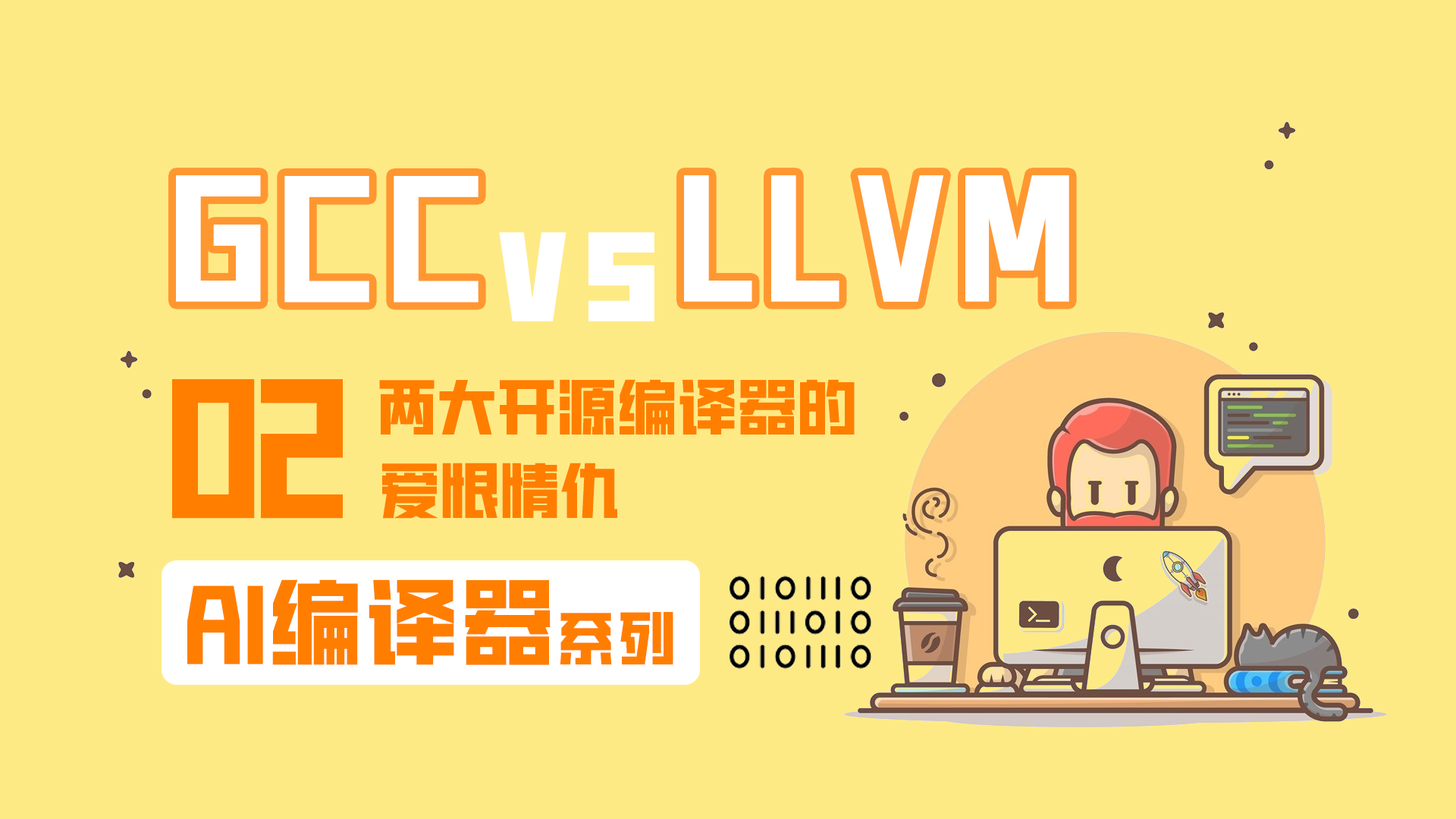
<style>
.page{position:relative;width:1456px;height:819px;background:#feea85}
.page>*{position:absolute;margin:0}
.t1{font:151.7px "HGGTZHVF-Medium";letter-spacing:0.1em;color:#ffffff}
.t2{font:166.8px "HGGTZHVF-Medium";letter-spacing:-0.01em;color:#ff7e00}
.t3{font:60.7px "HGGTZHVF-Medium";letter-spacing:-0.01em;color:#ff7e00;font-weight:bold}
.t4{font:93.8px "HGGTZHVF-Medium";letter-spacing:0.025em;color:#ff7e00;font-weight:bold}
.t5{font:58.2px "HGGTZHVF-Medium";letter-spacing:0.05em;color:#ff7e00;font-weight:bold}
</style>
<div class="page">
<p class="t1" style="left:176px;top:175px;width:893px;height:128px">GCC  LLVM</p>
<p class="t1" style="left:499px;top:232px;width:155px;height:90px">vs</p>
<p class="t2" style="left:172px;top:379px;width:171px;height:140px">02</p>
<p class="t3" style="left:379px;top:379px;width:476px;height:56px">两大开源编译器的</p>
<p class="t3" style="left:382px;top:463px;width:235px;height:56px">爱恨情仇</p>
<p class="t4" style="left:187px;top:579px;width:364px;height:86px">AI编译器</p>
<p class="t5" style="left:560px;top:612px;width:113px;height:53px">系列</p>
</div>
